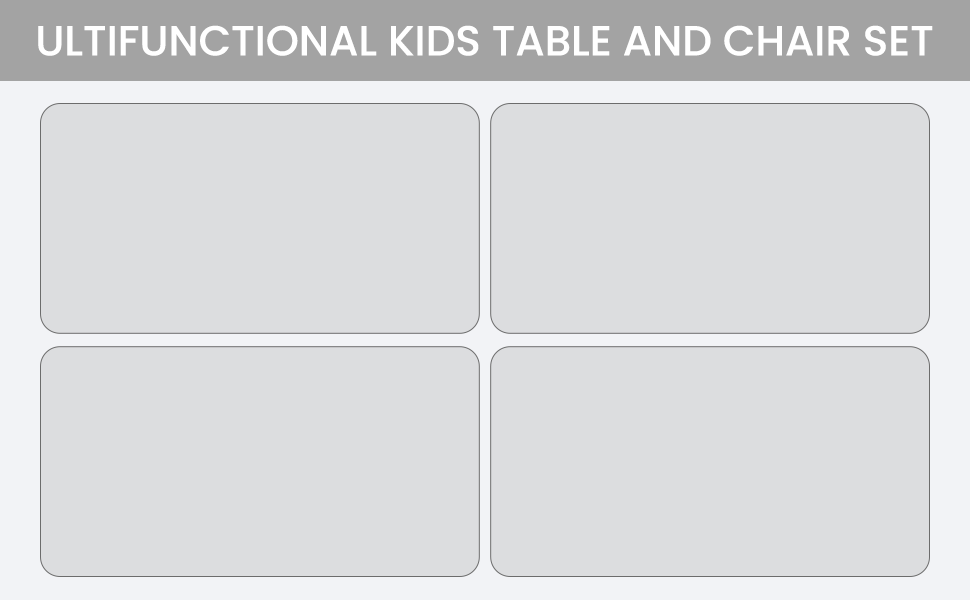
<style>
.page{position:relative;width:970px;height:600px;background:#dcdddf}
.page>*{position:absolute;margin:0}
.t1{font:42px "Poppins-Medium";color:#ffffff}
</style>
<div class="page">
<p class="t1" style="left:38px;top:25px;width:895px;height:31px">ULTIFUNCTIONAL KIDS TABLE AND CHAIR SET</p>
</div>
